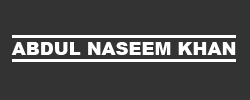
<style>
.page{position:relative;width:250px;height:100px;background:#333333}
.page>*{position:absolute;margin:0}
.t1{font:18px "Arial-Black";color:#ffffff}
</style>
<div class="page">
<p class="t1" style="left:11px;top:42px;width:225px;height:13px">ABDUL NASEEM KHAN</p>
</div>
